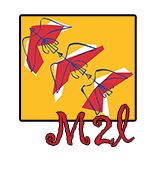
<style>
.page{position:relative;width:150px;height:170px;background:#ffffff}
.page>*{position:absolute;margin:0}
.t1{font:48px "Gigi-Regular";color:#d0212f}
</style>
<div class="page">
<p class="t1" style="left:46px;top:104px;width:88px;height:42px">M2l</p>
</div>
